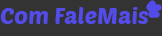
<style>
.page{position:relative;width:162px;height:36px;background:#333333}
.page>*{position:absolute;margin:0}
.t1{font:23.4px "PoetsenOne-Regular";color:#534cea}
</style>
<div class="page">
<p class="t1" style="left:0px;top:7px;width:149px;height:17px">Com FaleMais</p>
</div>
